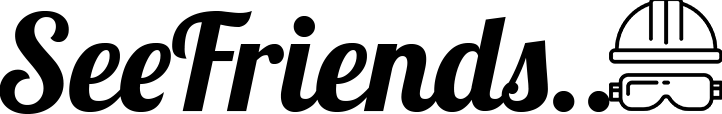
<style>
.page{position:relative;width:722px;height:114px;background:#ffffff}
.page>*{position:absolute;margin:0}
.t1{font:133.3px "Lobster-Regular";color:#000000}
</style>
<div class="page">
<p class="t1" style="left:0px;top:11px;width:610px;height:103px">SeeFriends..</p>
</div>
